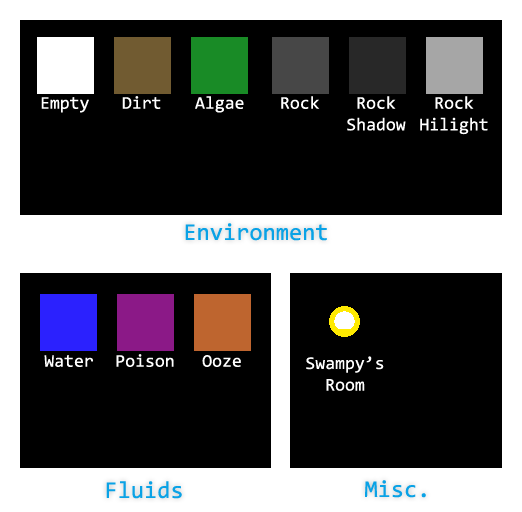
<style>
.page{position:relative;width:522px;height:512px;background:#000000}
.page>*{position:absolute;margin:0}
.t1{font:18px "Consolas";color:#ffffff}
.t2{font:24px "Consolas";color:#09a2e6}
.t3{font:18px "Consolas";color:#fefefe}
</style>
<div class="page">
<p class="t1" style="left:41px;top:97px;width:48px;height:16px">Empty</p>
<p class="t1" style="left:122px;top:96px;width:39px;height:13px">Dirt</p>
<p class="t1" style="left:195px;top:96px;width:49px;height:17px">Algae</p>
<p class="t1" style="left:281px;top:96px;width:39px;height:13px">Rock</p>
<p class="t1" style="left:347px;top:96px;width:59px;height:35px;text-align:center">Rock<br>Shadow</p>
<p class="t1" style="left:420px;top:96px;width:68px;height:39px;text-align:center">Rock<br>Hilight</p>
<p class="t2" style="left:185px;top:223px;width:142px;height:18px">Environment</p>
<p class="t1" style="left:44px;top:355px;width:49px;height:12px">Water</p>
<p class="t1" style="left:116px;top:354px;width:58px;height:13px">Poison</p>
<p class="t1" style="left:202px;top:355px;width:39px;height:12px">Ooze</p>
<p class="t3" style="left:306px;top:356px;width:78px;height:35px;text-align:center">Swampy’s<br>Room</p>
<p class="t2" style="left:106px;top:481px;width:76px;height:18px">Fluids</p>
<p class="t2" style="left:365px;top:480px;width:61px;height:18px">Misc.</p>
</div>
